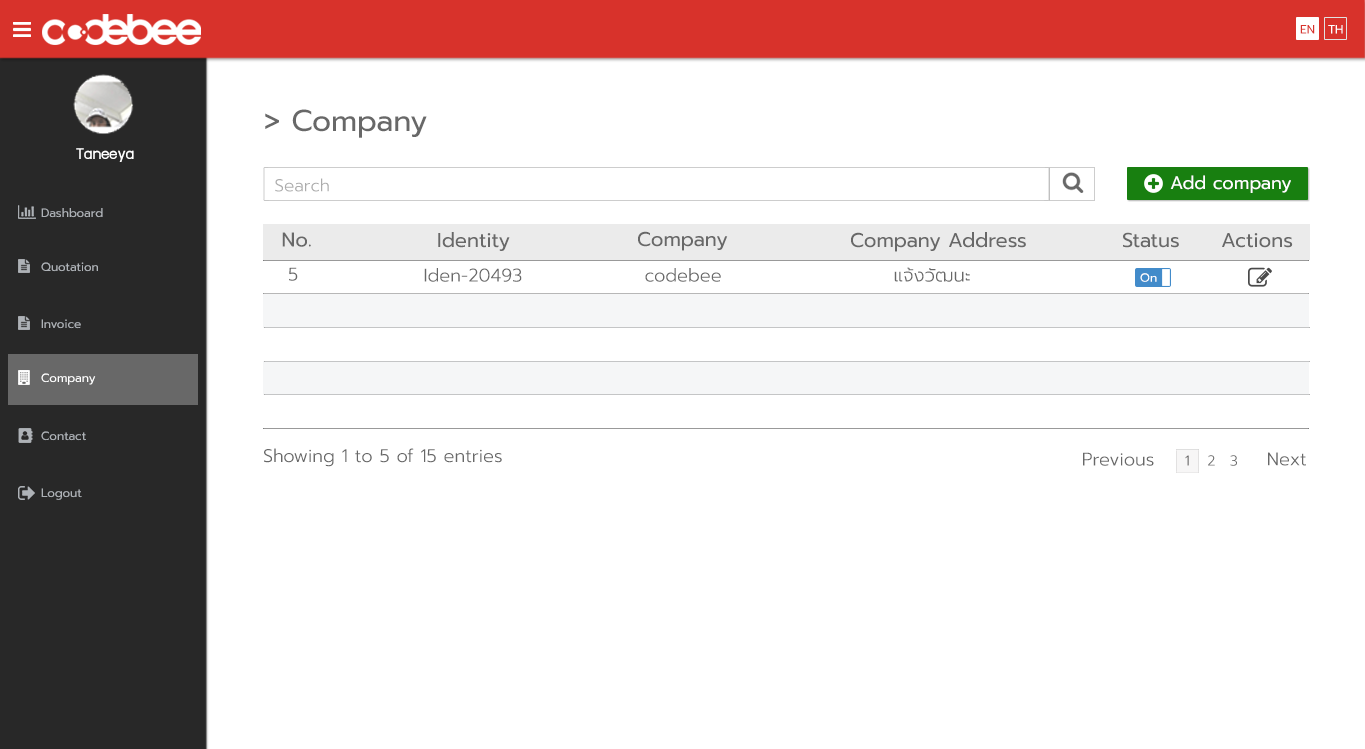
<style>
.page{position:relative;width:1365px;height:749px;background:#ffffff}
.page>*{position:absolute;margin:0}
.t1{font:12px "Prompt-Regular";color:#d8322b}
.t2{font:12px "Prompt-Regular";color:#ffffff}
.t3{font:30px "Prompt-Regular";color:#686868}
.t4{font:18px "supermarket";color:#ffffff}
.t5{font:17px "Prompt-Light";color:#acacac}
.t6{font:18px "Prompt-Regular";color:#ffffff}
.t7{font:12px "Prompt-Regular";color:#aeb2b7}
.t8{font:20px "Prompt-Regular";color:#686868}
.t9{font:18px "Prompt-Light";color:#686868}
.t10{font:14px "Prompt-Light";color:#686868}
</style>
<div class="page">
<p class="t1" style="left:1300px;top:25px;width:15px;height:9px">EN</p>
<p class="t2" style="left:1328px;top:25px;width:15px;height:9px">TH</p>
<p class="t3" style="left:265px;top:109px;width:162px;height:29px">&gt; Company</p>
<p class="t4" style="left:76px;top:148px;width:58px;height:14px">Taneeya</p>
<p class="t5" style="left:275px;top:178px;width:54px;height:14px">Search</p>
<p class="t6" style="left:1170px;top:175px;width:121px;height:18px">Add company</p>
<p class="t7" style="left:41px;top:208px;width:62px;height:10px">Dashboard</p>
<p class="t8" style="left:282px;top:232px;width:29px;height:15px">No.</p>
<p class="t8" style="left:438px;top:232px;width:72px;height:19px">Identity</p>
<p class="t8" style="left:638px;top:231px;width:90px;height:20px">Company</p>
<p class="t8" style="left:851px;top:232px;width:175px;height:20px">Company Address</p>
<p class="t8" style="left:1123px;top:232px;width:56px;height:16px">Status</p>
<p class="t8" style="left:1222px;top:233px;width:71px;height:15px">Actions</p>
<p class="t7" style="left:41px;top:262px;width:57px;height:10px">Quotation</p>
<p class="t9" style="left:289px;top:267px;width:9px;height:14px">5</p>
<p class="t9" style="left:424px;top:268px;width:98px;height:14px">Iden-20493</p>
<p class="t9" style="left:645px;top:268px;width:76px;height:14px">codebee</p>
<p class="t9" style="left:894px;top:267px;width:76px;height:15px">แจ้งวัฒนะ</p>
<p class="t2" style="left:1140px;top:273px;width:17px;height:9px">On</p>
<p class="t7" style="left:41px;top:319px;width:40px;height:10px">Invoice</p>
<p class="t2" style="left:41px;top:373px;width:55px;height:12px">Company</p>
<p class="t7" style="left:41px;top:431px;width:45px;height:10px">Contact</p>
<p class="t9" style="left:264px;top:448px;width:238px;height:19px">Showing 1 to 5 of 15 entries</p>
<p class="t9" style="left:1083px;top:452px;width:71px;height:14px">Previous</p>
<p class="t10" style="left:1185px;top:455px;width:4px;height:11px">1</p>
<p class="t10" style="left:1208px;top:455px;width:7px;height:11px">2</p>
<p class="t10" style="left:1230px;top:455px;width:7px;height:11px">3</p>
<p class="t9" style="left:1268px;top:452px;width:38px;height:14px">Next</p>
<p class="t7" style="left:41px;top:488px;width:41px;height:12px">Logout</p>
</div>
